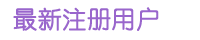
<style>
.page{position:relative;width:200px;height:40px;background:#ffffff}
.page>*{position:absolute;margin:0}
.t1{font:24px "YouYuan";color:#9966cc;font-weight:bold}
</style>
<div class="page">
<p class="t1" style="left:13px;top:7px;width:146px;height:24px">最新注册用户</p>
</div>
